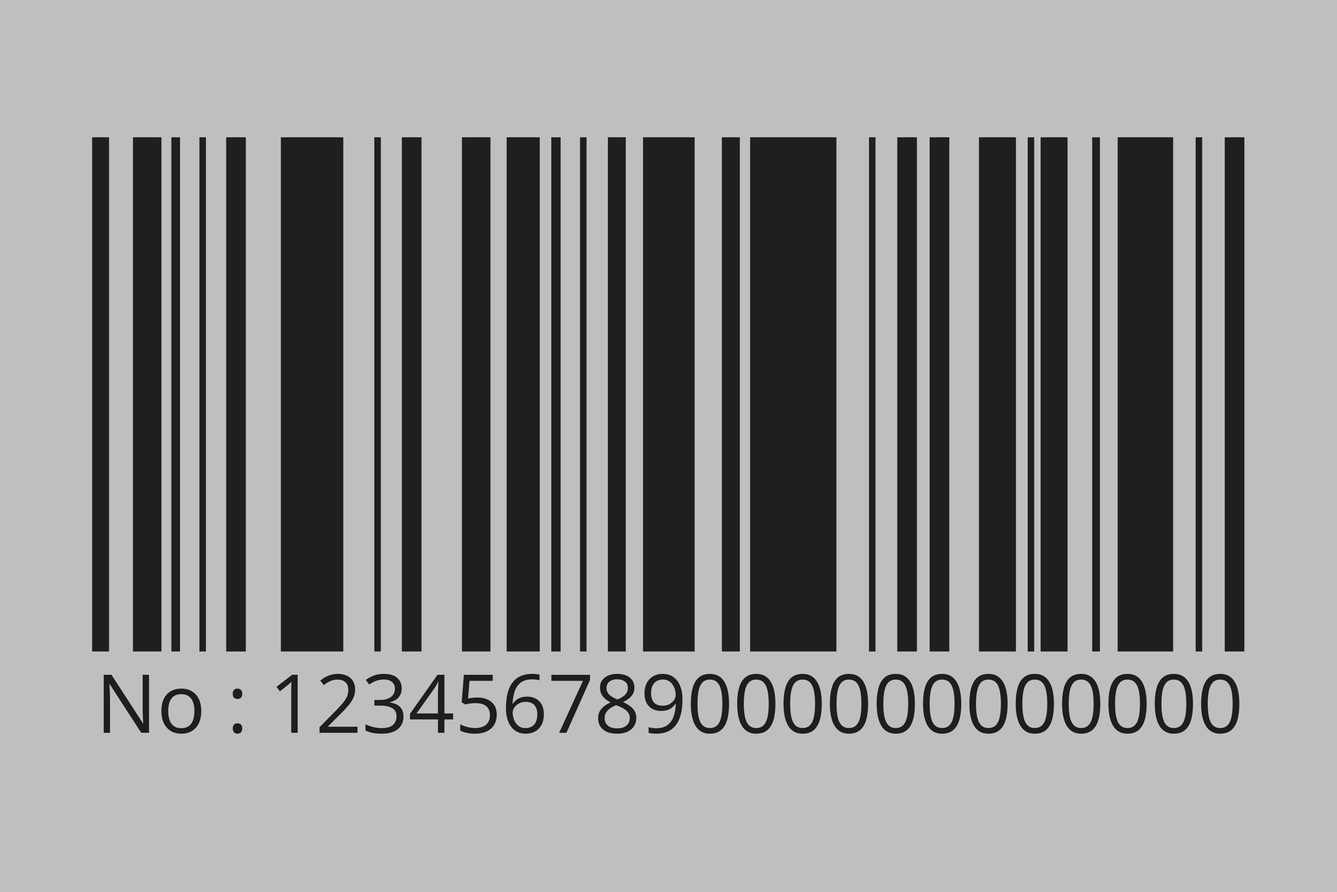
<style>
.page{position:relative;width:1337px;height:892px;background:#bfbfbf}
.page>*{position:absolute;margin:0}
.t1{font:81.2px "OpenSans";color:#1e1d21}
</style>
<div class="page">
<p class="t1" style="left:103px;top:674px;width:1137px;height:59px">No : 123456789000000000000</p>
</div>
